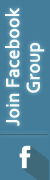
<style>
.page{position:relative;width:50px;height:180px;background:#447d9a}
.page>*{position:absolute;margin:0}
.t1{font:19px "Corbel";color:#fbfafa;font-weight:bold}
.t2{font:19px "Corbel";color:#f8f9fa;font-weight:bold}
</style>
<div class="page">
<p class="t1" style="left:5px;top:8px;width:15px;height:118px;rotate:-90deg">Join Facebook</p>
<p class="t2" style="left:26px;top:42px;width:19px;height:51px;rotate:-90deg">Group</p>
</div>
